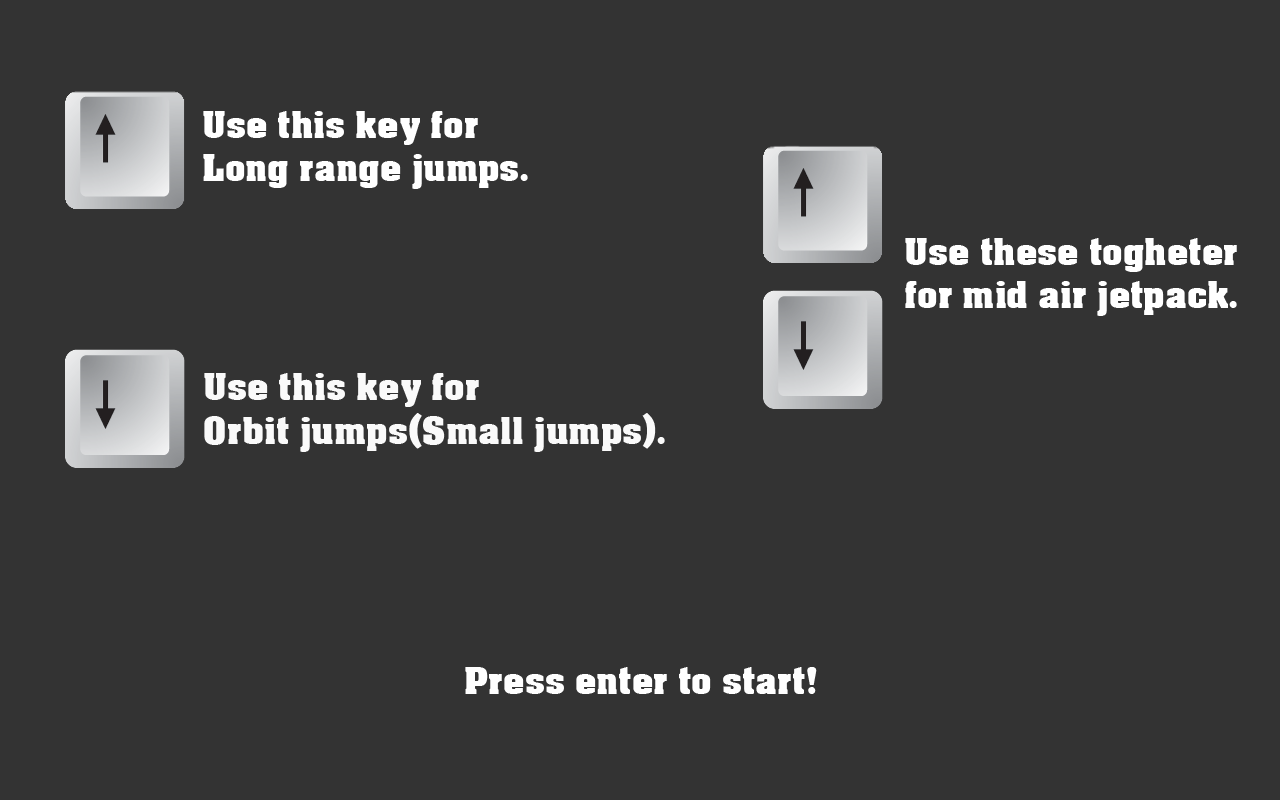
<style>
.page{position:relative;width:1280px;height:800px;background:#333333}
.page>*{position:absolute;margin:0}
.t1{font:36px "AcmeFont";color:#ffffff}
.t2{font:36px "AcmeFont";color:#fafafa}
</style>
<div class="page">
<p class="t1" style="left:203px;top:111px;width:325px;height:78px">Use this key for <br>Long range jumps.</p>
<p class="t1" style="left:905px;top:238px;width:332px;height:78px">Use these togheter<br>for mid air jetpack.</p>
<p class="t2" style="left:204px;top:373px;width:461px;height:79px">Use this key for<br>Orbit jumps(Small jumps).</p>
<p class="t1" style="left:465px;top:667px;width:352px;height:27px">Press enter to start!</p>
</div>
